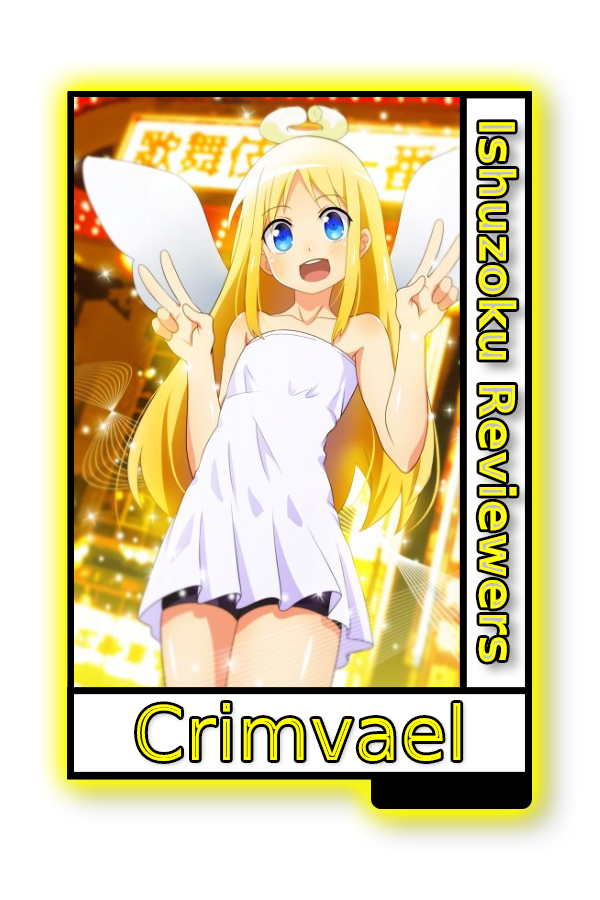
<style>
.page{position:relative;width:600px;height:900px;background:#ffffff}
.page>*{position:absolute;margin:0}
.t1{font:48.8px "MADETOMMY-Bold"}
.t2{font:75px "CoolveticaRg-Regular";color:#ffff00}
</style>
<div class="page">
<p class="t1" style="left:478px;top:122px;width:39px;height:540px;rotate:90deg">Ishuzoku Reviewers</p>
<p class="t2" style="left:136px;top:703px;width:325px;height:59px">Crimvael</p>
</div>
